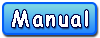
<style>
.page{position:relative;width:100px;height:38px;background:#ffffff}
.page>*{position:absolute;margin:0}
.t1{font:20.8px "ComicSansMS-Bold";letter-spacing:0.08em;color:#ffffff}
</style>
<div class="page">
<p class="t1" style="left:12px;top:10px;width:76px;height:17px">Manual</p>
</div>
